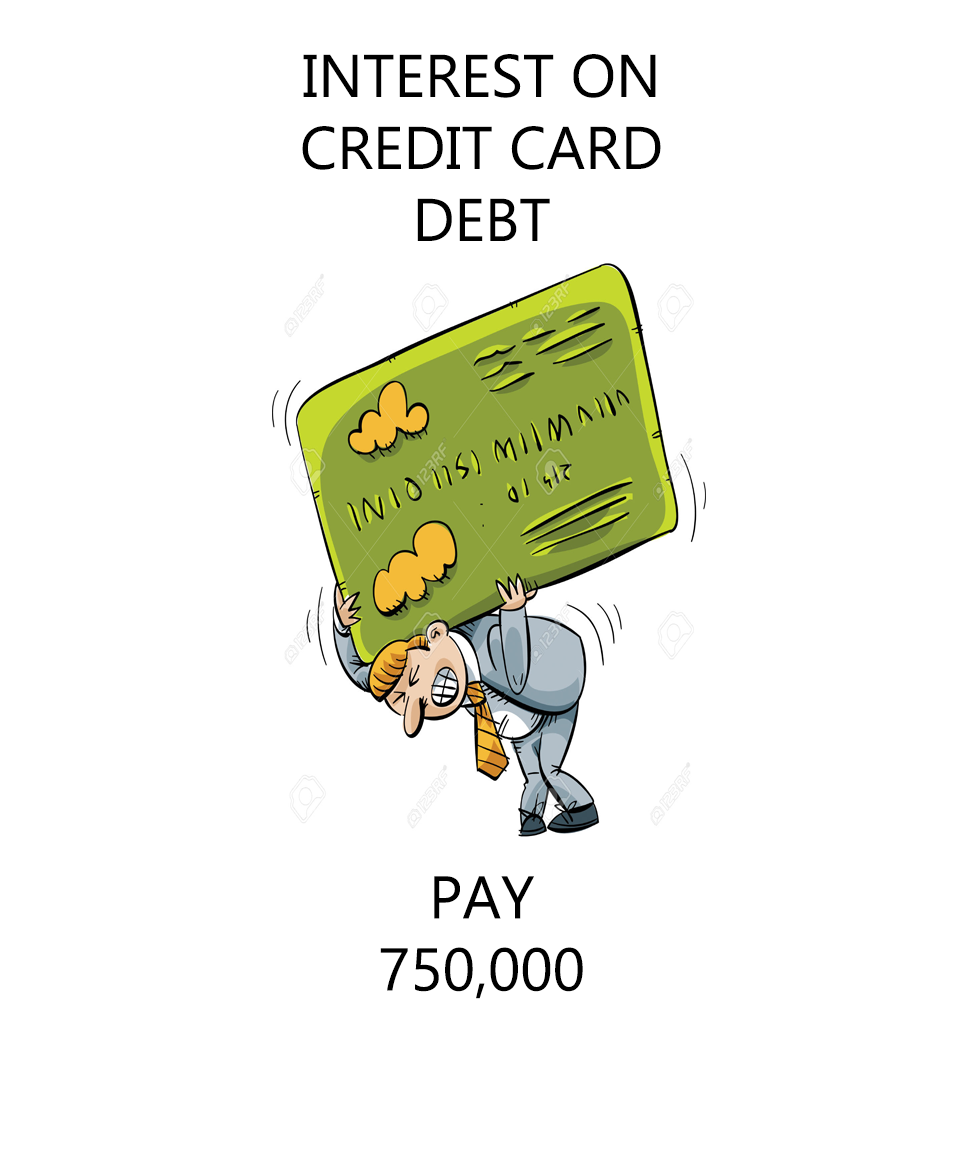
<style>
.page{position:relative;width:966px;height:1164px;background:#ffffff}
.page>*{position:absolute;margin:0}
.t1{font:60px "Ebrima";color:#000000}
</style>
<div class="page">
<p class="t1" style="left:302px;top:54px;width:359px;height:187px;text-align:center">INTEREST ON<br>CREDIT CARD<br>DEBT</p>
<p class="t1" style="left:380px;top:876px;width:203px;height:123px;text-align:center">PAY<br>750,000</p>
</div>
